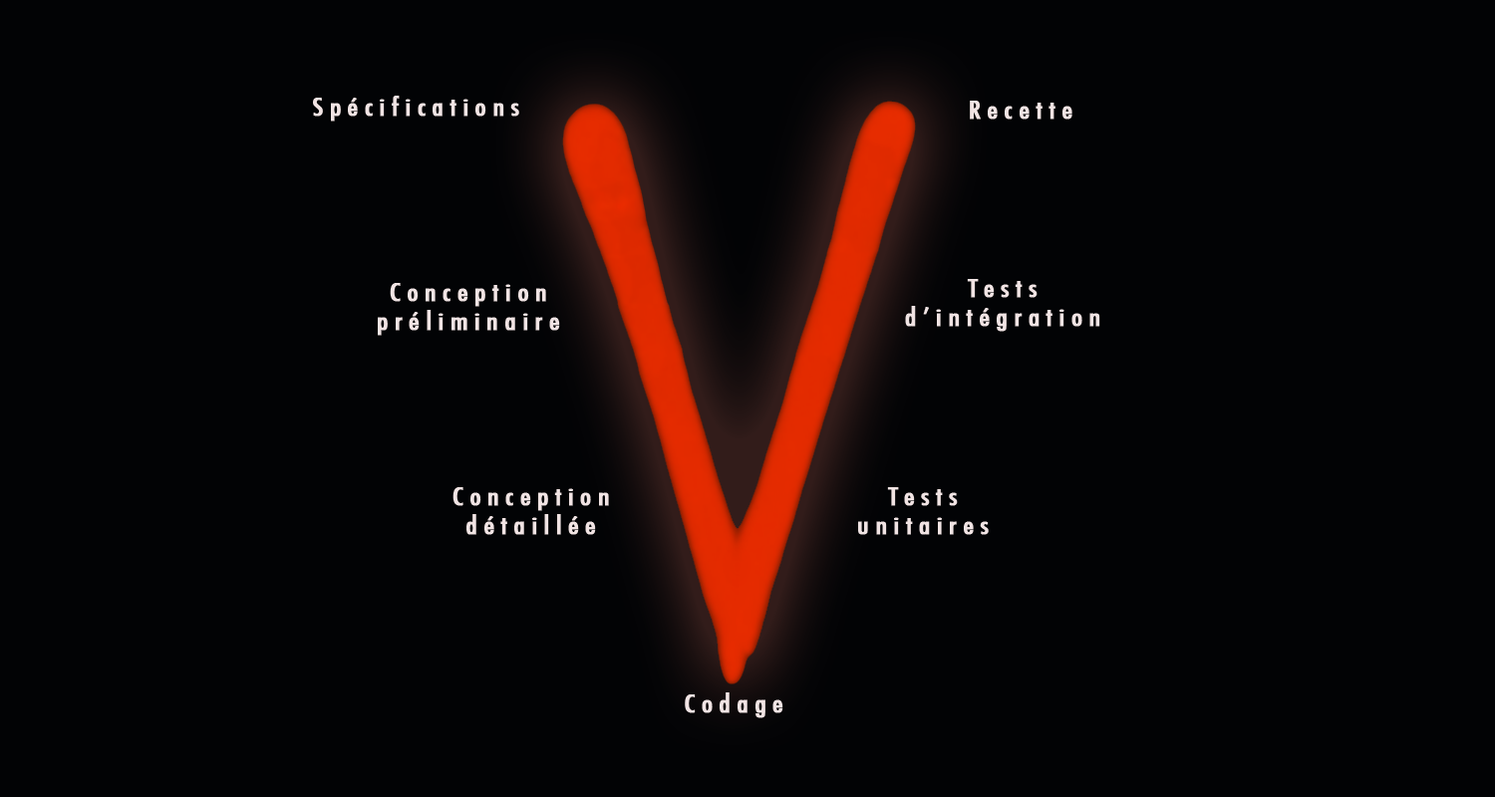
<style>
.page{position:relative;width:1495px;height:797px;background:#020305}
.page>*{position:absolute;margin:0}
.t1{font:23.9px "Futura-CondensedMedium";letter-spacing:0.2em;color:#f1e4e4;font-weight:bold;scale:1.2 1}
</style>
<div class="page">
<p class="t1" style="left:313px;top:96px;width:206px;height:26px">Spécifications</p>
<p class="t1" style="left:970px;top:101px;width:103px;height:19px">Recette</p>
<p class="t1" style="left:905px;top:279px;width:196px;height:53px;text-align:center">Tests<br>d’intégration</p>
<p class="t1" style="left:378px;top:283px;width:182px;height:53px;text-align:center">Conception <br>préliminaire</p>
<p class="t1" style="left:453px;top:487px;width:156px;height:48px;text-align:center">Conception <br>détaillée</p>
<p class="t1" style="left:858px;top:487px;width:131px;height:48px;text-align:center">Tests<br>unitaires</p>
<p class="t1" style="left:685px;top:693px;width:99px;height:26px">Codage</p>
</div>
